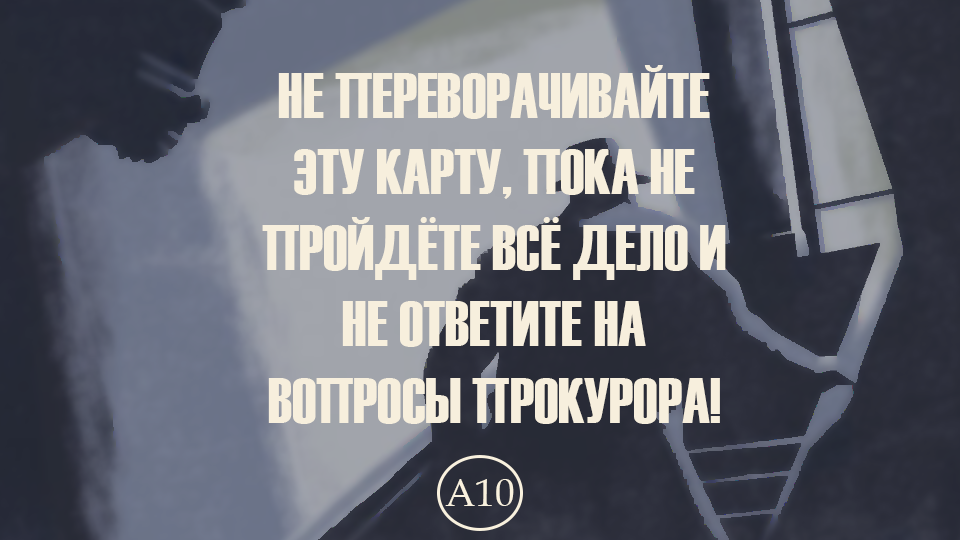
<style>
.page{position:relative;width:960px;height:540px}
.page>*{position:absolute;margin:0}
.t1{font:63.6px "Haettenschweiler";color:#f7efdd;text-transform:uppercase}
.t2{font:38.8px "BookAntiqua";color:#f9f1de}
</style>
<div class="page">
<p class="t1" style="left:262px;top:65px;width:464px;height:359px;text-align:center">Не переворачивайте эту карту, пока не пройдёте всё дело и не ответите на вопросы прокурора!</p>
<p class="t2" style="left:445px;top:479px;width:69px;height:27px">A10</p>
</div>
